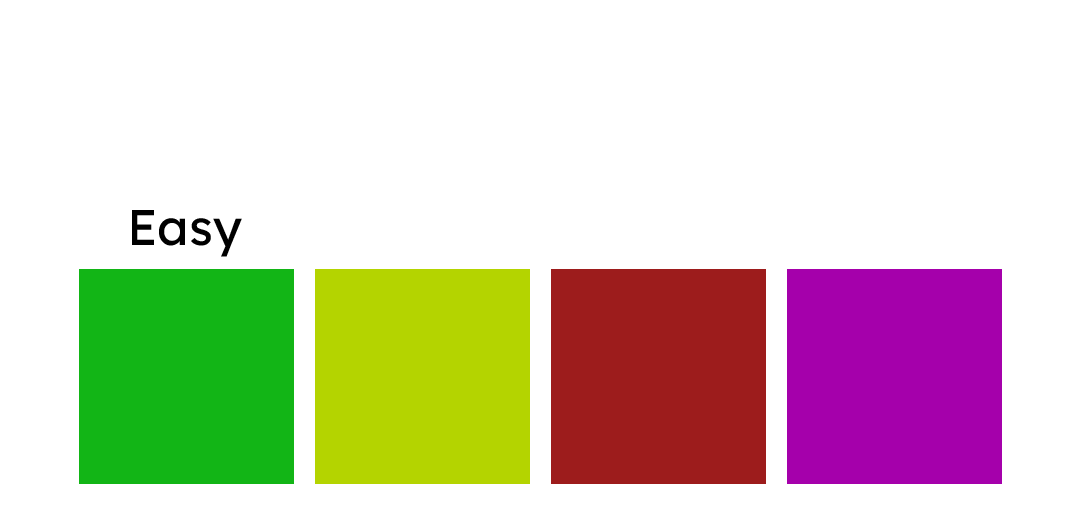
<style>
.page{position:relative;width:1080px;height:512px;background:#ffffff}
.page>*{position:absolute;margin:0}
.t1{font:50px "LexendDeca-Regular";color:#000000}
</style>
<div class="page">
<p class="t1" style="left:132px;top:210px;width:110px;height:47px">Easy</p>
</div>
